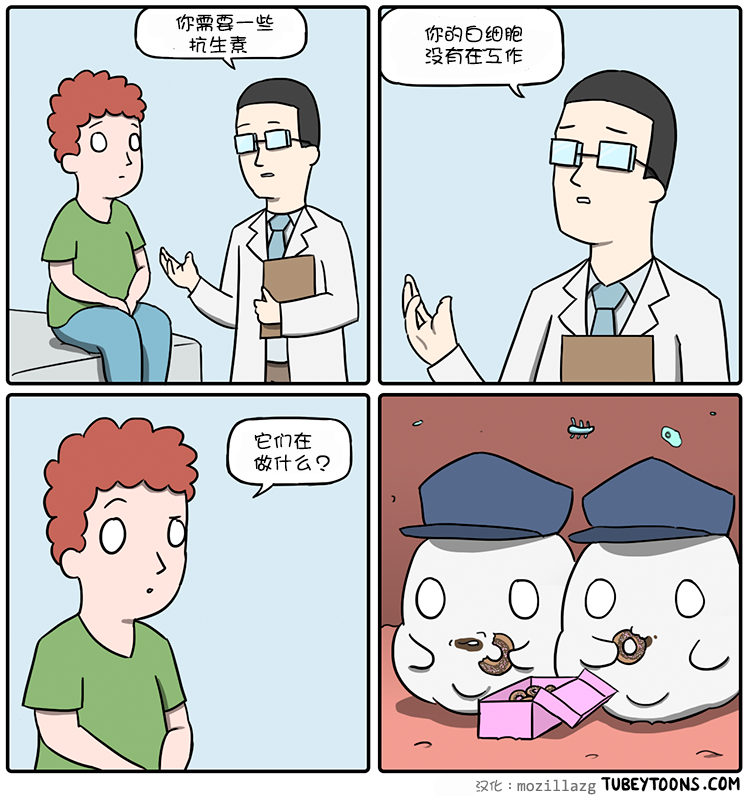
<style>
.page{position:relative;width:750px;height:796px}
.page>*{position:absolute;margin:0}
.t1{font:20px/22px "DFGirl";color:#000000}
</style>
<div class="page">
<p class="t1" style="left:175px;top:14px;width:99px;height:40px">你需要一些<br>  抗生素</p>
<p class="t1" style="left:424px;top:25px;width:99px;height:40px">你的白细胞<br>没有在工作</p>
<p class="t1" style="left:254px;top:432px;width:76px;height:40px">它们在<br>做什么？</p>
</div>
